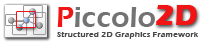
<style>
.page{position:relative;width:203px;height:43px;background:#ffffff}
.page>*{position:absolute;margin:0}
.t1{font:30px "ErasITC-Bold";color:#f11414}
.t2{font:30px "ErasITC-Demi";color:#737373}
.t3{font:30px "ErasITC-Demi";color:#f11414}
.t4{font:8.5px "ErasITC-Demi";color:#494949}
</style>
<div class="page">
<p class="t1" style="left:156px;top:5px;width:41px;height:20px">2D</p>
<p class="t2" style="left:57px;top:7px;width:98px;height:20px"><span class="t3">P</span>iccolo</p>
<p class="t4" style="left:57px;top:32px;width:142px;height:7px">Structured 2D Graphics Framework</p>
</div>
